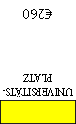
<style>
.page{position:relative;width:76px;height:124px;background:#ffffff}
.page>*{position:absolute;margin:0}
.t1{font:14px "MyriadPro-Regular";color:#000000}
.t2{font:12px "AdobeDevanagari-Regular";color:#000000;scale:0.9 1}
</style>
<div class="page">
<p class="t1" style="left:23px;top:9px;width:29px;height:10px;rotate:180deg">€260</p>
<p class="t2" style="left:3px;top:74px;width:70px;height:23px;text-align:center;rotate:180deg">UNIVERSITÄTS-<br>PLATZ</p>
</div>
